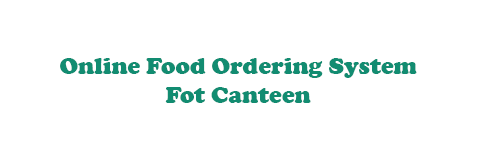
<style>
.page{position:relative;width:480px;height:164px;background:#ffffff}
.page>*{position:absolute;margin:0}
.t1{font:24px "CooperBlack";color:#128c71}
</style>
<div class="page">
<p class="t1" style="left:60px;top:58px;width:357px;height:45px;text-align:center">Online Food Ordering System<br>Fot Canteen</p>
</div>
